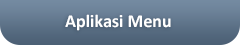
<style>
.page{position:relative;width:240px;height:45px}
.page>*{position:absolute;margin:0}
.t1{font:18px "Calibri-Bold";color:#ffffff}
</style>
<div class="page">
<p class="t1" style="left:65px;top:14px;width:106px;height:17px">Aplikasi Menu</p>
</div>
